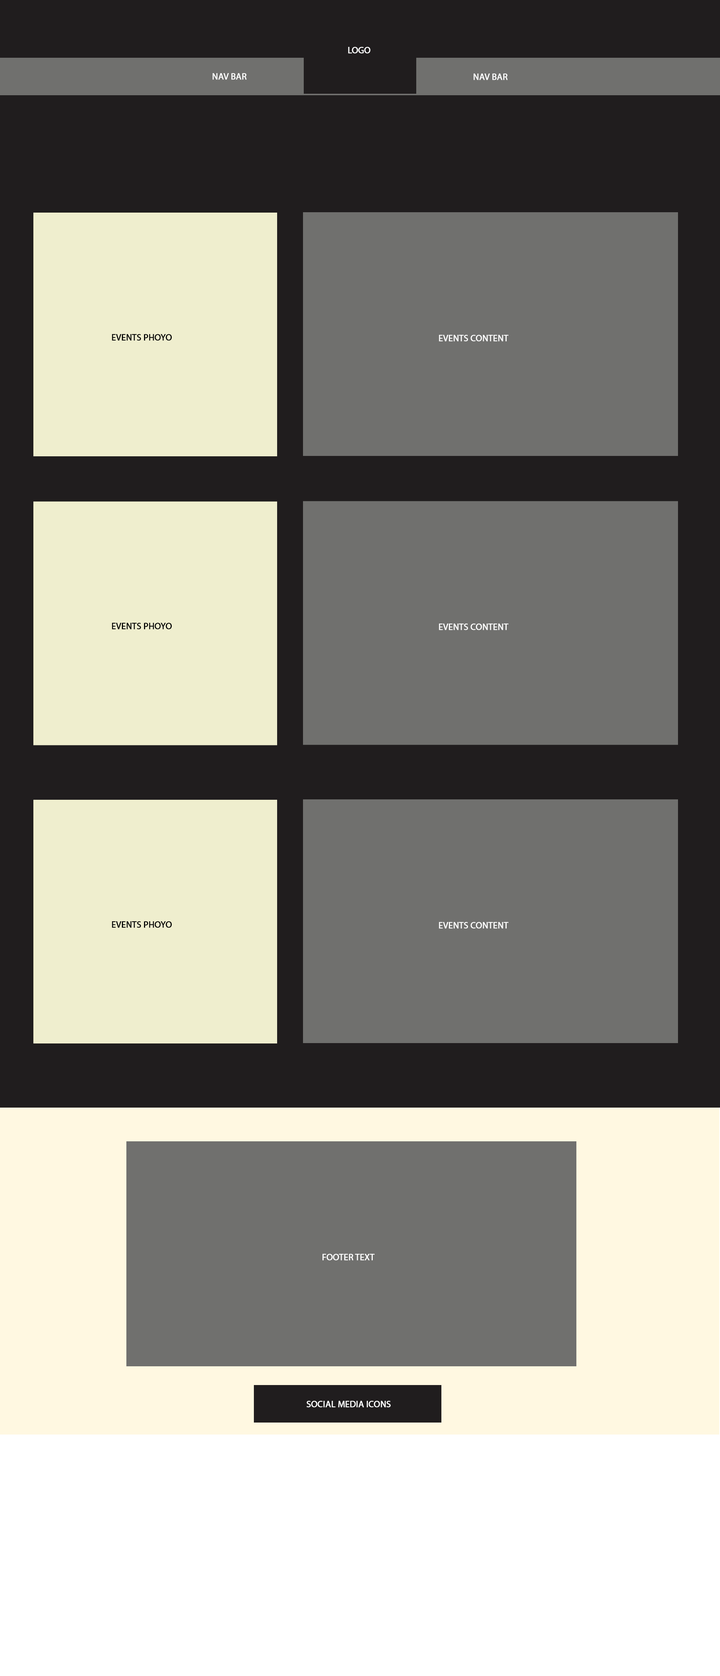
<style>
.page{position:relative;width:720px;height:1676px;background:#70706e}
.page>*{position:absolute;margin:0}
.t1{font:9px "MyriadPro-Regular";letter-spacing:-0.003em;color:#ffffff;font-weight:bold}
.t2{font:9px "MyriadPro-Regular";letter-spacing:-0.003em;color:#fefefe;font-weight:bold}
.t3{font:9px "MyriadPro-Regular";letter-spacing:-0.003em;color:#050505;font-weight:bold}
</style>
<div class="page">
<p class="t1" style="left:348px;top:47px;width:22px;height:7px">LOGO</p>
<p class="t2" style="left:213px;top:73px;width:34px;height:7px">NAV BAR</p>
<p class="t2" style="left:474px;top:74px;width:34px;height:6px">NAV BAR</p>
<p class="t3" style="left:112px;top:334px;width:60px;height:7px">EVENTS PHOYO</p>
<p class="t2" style="left:439px;top:335px;width:69px;height:7px">EVENTS CONTENT</p>
<p class="t3" style="left:112px;top:623px;width:60px;height:7px">EVENTS PHOYO</p>
<p class="t2" style="left:439px;top:624px;width:69px;height:6px">EVENTS CONTENT</p>
<p class="t3" style="left:112px;top:921px;width:60px;height:7px">EVENTS PHOYO</p>
<p class="t2" style="left:439px;top:922px;width:69px;height:7px">EVENTS CONTENT</p>
<p class="t1" style="left:322px;top:1254px;width:53px;height:7px">FOOTER TEXT</p>
<p class="t1" style="left:306px;top:1401px;width:85px;height:7px">SOCIAL MEDIA ICONS</p>
</div>
